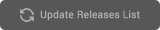
<style>
.page{position:relative;width:160px;height:30px;background:#575757}
.page>*{position:absolute;margin:0}
.t1{font:10px "Roboto-Regular";color:#aeaeae;font-weight:bold}
</style>
<div class="page">
<p class="t1" style="left:40px;top:10px;width:100px;height:11px">Update Releases List</p>
</div>
